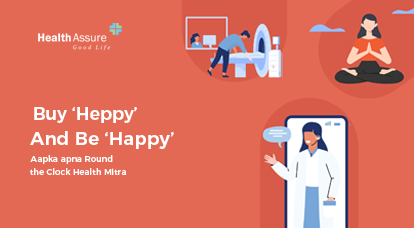
<style>
.page{position:relative;width:414px;height:228px;background:#e36954}
.page>*{position:absolute;margin:0}
.t1{font:17.3px "Montserrat-SemiBold";color:#ffffff}
.t2{font:18.5px "Montserrat-SemiBold";color:#ffffff}
.t3{font:8.5px "Montserrat-Medium";color:#ffffff}
</style>
<div class="page">
<p class="t1" style="left:34px;top:107px;width:103px;height:16px">Buy ‘Heppy’</p>
<p class="t2" style="left:30px;top:131px;width:144px;height:18px">And Be ‘Happy’</p>
<p class="t3" style="left:30px;top:155px;width:83px;height:9px">Aapka apna Round</p>
<p class="t3" style="left:30px;top:168px;width:96px;height:7px">the Clock Health Mitra</p>
</div>
